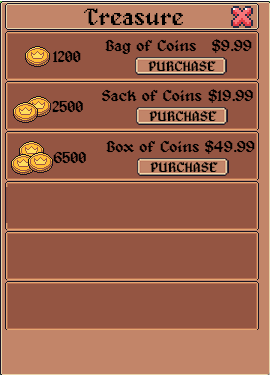
<style>
.page{position:relative;width:270px;height:375px;background:#945542}
.page>*{position:absolute;margin:0}
.t1{font:24px "Alagard";color:#000000}
.t2{font:16px "Alagard";color:#000000}
.t3{font:14px "Alagard";color:#000000}
</style>
<div class="page">
<p class="t1" style="left:84px;top:8px;width:99px;height:17px">Treasure</p>
<p class="t2" style="left:105px;top:39px;width:91px;height:15px">Bag of Coins</p>
<p class="t2" style="left:212px;top:39px;width:40px;height:14px">$9.99</p>
<p class="t2" style="left:53px;top:50px;width:28px;height:13px">1200</p>
<p class="t3" style="left:148px;top:61px;width:68px;height:11px">PURCHASE</p>
<p class="t2" style="left:102px;top:89px;width:100px;height:13px">Sack of Coins</p>
<p class="t2" style="left:208px;top:89px;width:45px;height:14px">$19.99</p>
<p class="t2" style="left:52px;top:100px;width:31px;height:13px">2500</p>
<p class="t3" style="left:149px;top:111px;width:68px;height:11px">PURCHASE</p>
<p class="t2" style="left:106px;top:140px;width:93px;height:13px">Box of Coins</p>
<p class="t2" style="left:205px;top:140px;width:50px;height:14px">$49.99</p>
<p class="t2" style="left:53px;top:151px;width:33px;height:13px">6500</p>
<p class="t3" style="left:150px;top:162px;width:68px;height:11px">PURCHASE</p>
</div>
